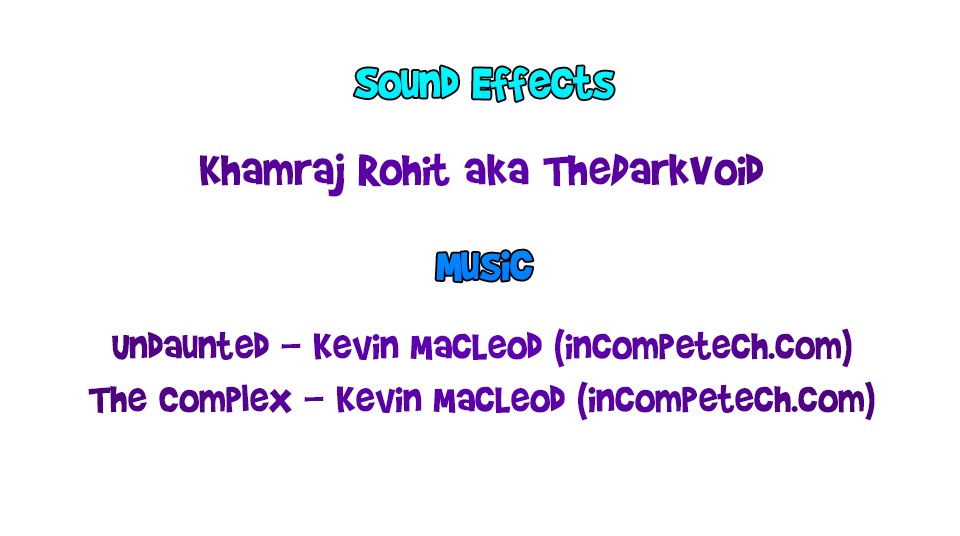
<style>
.page{position:relative;width:960px;height:536px;background:#ffffff}
.page>*{position:absolute;margin:0}
.t1{font:50.7px "BradyBunchRemastered";color:#00f1ff}
.t2{font:44px "BradyBunchRemastered";color:#58009f}
.t3{font:50.7px "BradyBunchRemastered";color:#58009f}
</style>
<div class="page">
<p class="t1" style="left:354px;top:66px;width:260px;height:216px;text-align:center">Sound Effects<br><br><br>Music</p>
<p class="t2" style="left:88px;top:153px;width:787px;height:268px;text-align:center"><span class="t3">Khamraj Rohit aka TheDarkVoid<br><br><br></span>Undaunted - Kevin MacLeod (incompetech.com)<br>The Complex - Kevin MacLeod (incompetech.com)</p>
</div>
